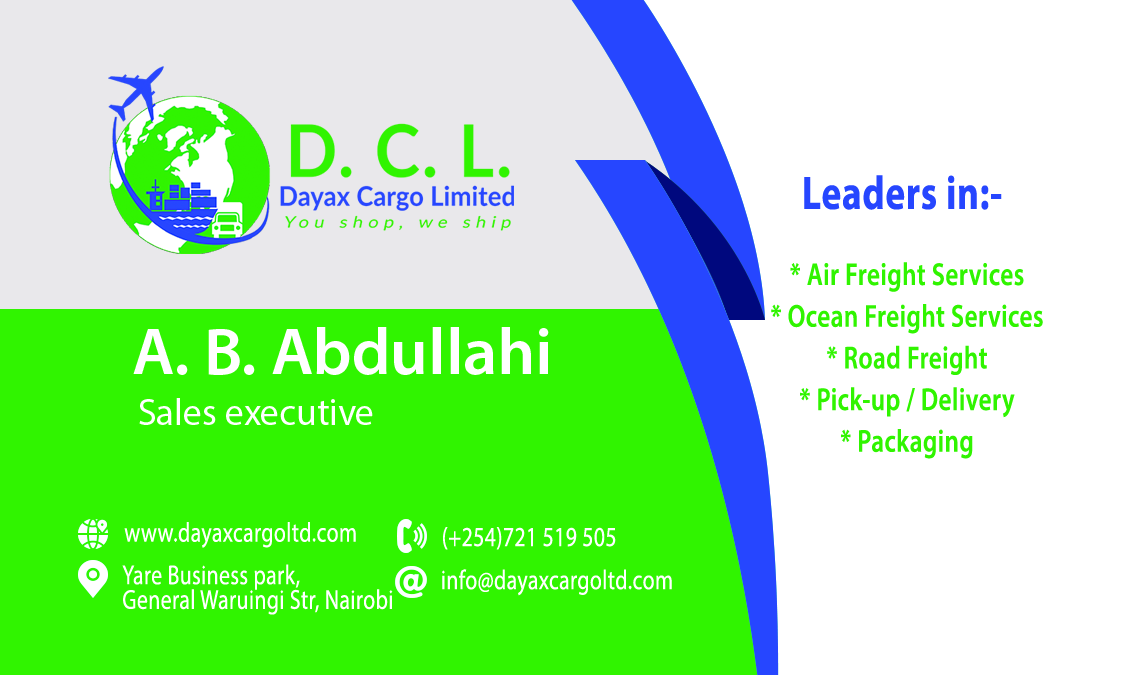
<style>
.page{position:relative;width:1125px;height:675px;background:#30f400}
.page>*{position:absolute;margin:0}
.t1{font:47.4px "MyriadPro-Bold";letter-spacing:0.02em;color:#2646ff;scale:0.79 1}
.t2{font:31.8px/41.7px "MyriadPro-Semibold";letter-spacing:0.02em;color:#30f400;scale:0.79 1}
.t3{font:66.7px "MyriadPro-Semibold";color:#ffffff}
.t4{font:37.5px "MyriadPro-Regular";color:#ffffff}
.t5{font:27.4px "MyriadPro-Regular";letter-spacing:0.02em;color:#ffffff;scale:0.79 1}
.t6{font:27.4px/24.6px "MyriadPro-Regular";letter-spacing:0.02em;color:#ffffff;scale:0.79 1}
</style>
<div class="page">
<p class="t1" style="left:804px;top:175px;width:198px;height:35px">Leaders in:-</p>
<p class="t2" style="left:771px;top:262px;width:272px;height:197px;text-align:center">* Air Freight Services<br>* Ocean Freight Services<br>* Road Freight<br>* Pick-up / Delivery<br>* Packaging</p>
<p class="t3" style="left:133px;top:327px;width:416px;height:48px">A. B. Abdullahi</p>
<p class="t4" style="left:139px;top:398px;width:234px;height:27px">Sales executive</p>
<p class="t5" style="left:124px;top:522px;width:232px;height:26px">www.dayaxcargoltd.com</p>
<p class="t5" style="left:443px;top:527px;width:173px;height:23px">(+254)721 519 505</p>
<p class="t6" style="left:122px;top:564px;width:271px;height:51px">Yare Business park,<br>General Waruingi Str, Nairobi</p>
<p class="t5" style="left:442px;top:569px;width:230px;height:27px">info@dayaxcargoltd.com</p>
</div>
